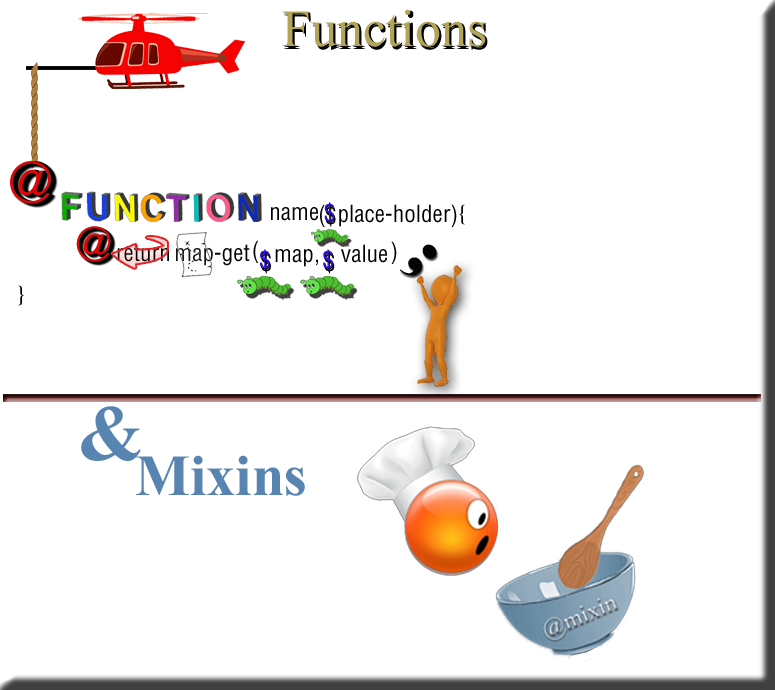
<style>
.page{position:relative;width:775px;height:690px;background:#ffffff}
.page>*{position:absolute;margin:0}
.t1{font:52px "TimesNewRomanPSMT";color:#b2a458}
.t2{font:52px "TimesNewRomanPSMT"}
.t3{font:56.1px "HelveticaLTStd-Cond";color:#da0707}
.t4{font:56.1px "HelveticaLTStd-Cond"}
.t5{font:56.1px "HelveticaLTStd-Cond";color:#000000}
.t6{font:23.1px "HelveticaLTStd-Cond";color:#000000}
.t7{font:23.1px "HelveticaLTStd-Cond";color:#3411ea}
.t8{font:23.1px "HelveticaLTStd-Cond"}
.t9{font:46.4px "HelveticaLTStd-Cond";color:#da0707}
.t10{font:46.4px "HelveticaLTStd-Cond"}
.t11{font:46.4px "HelveticaLTStd-Cond";color:#000000}
.t12{font:66.7px "Elephant-Regular";color:#040404;scale:1.13 1}
.t13{font:79.3px "TimesNewRomanPS-BoldMT";color:#5884b2}
.t14{font:58.3px "TimesNewRomanPS-BoldMT";color:#5884b2}
</style>
<div class="page">
<p class="t1" style="left:282px;top:9px;width:204px;height:38px">Functions</p>
<p class="t2" style="left:284px;top:12px;width:204px;height:38px">Functions</p>
<p class="t2" style="left:284px;top:10px;width:204px;height:38px">Functions</p>
<p class="t3" style="left:10px;top:161px;width:41px;height:43px">@</p>
<p class="t4" style="left:13px;top:161px;width:41px;height:43px">@</p>
<p class="t5" style="left:14px;top:163px;width:41px;height:43px">@</p>
<p class="t5" style="left:15px;top:163px;width:41px;height:43px">@</p>
<p class="t6" style="left:271px;top:207px;width:47px;height:14px">name</p>
<p class="t6" style="left:320px;top:204px;width:137px;height:23px">(  place-holder)</p>
<p class="t7" style="left:324px;top:202px;width:11px;height:22px">$</p>
<p class="t8" style="left:325px;top:203px;width:10px;height:22px">$</p>
<p class="t6" style="left:326px;top:205px;width:10px;height:22px">$</p>
<p class="t6" style="left:459px;top:204px;width:6px;height:21px">{</p>
<p class="t9" style="left:76px;top:226px;width:35px;height:36px">@</p>
<p class="t10" style="left:78px;top:227px;width:35px;height:36px">@</p>
<p class="t11" style="left:79px;top:228px;width:35px;height:36px">@</p>
<p class="t11" style="left:79px;top:228px;width:35px;height:36px">@</p>
<p class="t6" style="left:117px;top:244px;width:52px;height:18px">return</p>
<p class="t6" style="left:176px;top:244px;width:74px;height:22px">map-get</p>
<p class="t6" style="left:253px;top:240px;width:6px;height:23px">(</p>
<p class="t6" style="left:341px;top:244px;width:46px;height:19px">value</p>
<p class="t6" style="left:391px;top:241px;width:6px;height:23px">)</p>
<p class="t12" style="left:399px;top:244px;width:38px;height:32px;rotate:48deg">;</p>
<p class="t8" style="left:260px;top:250px;width:11px;height:22px">$</p>
<p class="t7" style="left:260px;top:249px;width:10px;height:22px">$</p>
<p class="t8" style="left:261px;top:252px;width:10px;height:22px">$</p>
<p class="t6" style="left:275px;top:249px;width:43px;height:18px">map,</p>
<p class="t7" style="left:323px;top:249px;width:10px;height:22px">$</p>
<p class="t8" style="left:324px;top:252px;width:11px;height:22px">$</p>
<p class="t8" style="left:324px;top:250px;width:10px;height:22px">$</p>
<p class="t6" style="left:18px;top:285px;width:6px;height:21px">}</p>
<p class="t13" style="left:81px;top:406px;width:60px;height:55px">&amp;</p>
<p class="t14" style="left:136px;top:455px;width:169px;height:41px">Mixins</p>
</div>
